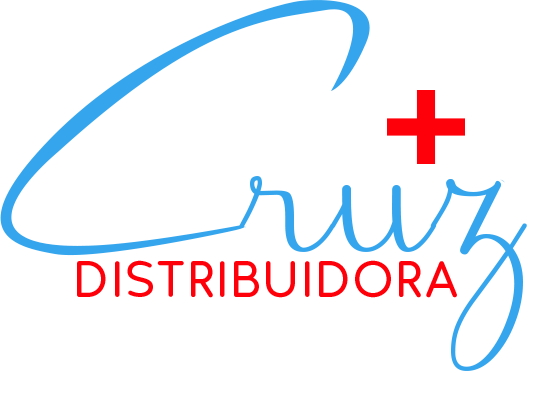
<style>
.page{position:relative;width:553px;height:393px;background:#ffffff}
.page>*{position:absolute;margin:0}
.t1{font:150px "JBCursive";color:#35a5ed}
.t2{font:53px "HankRnd-Regular";letter-spacing:0.03em;color:#fd0009}
</style>
<div class="page">
<p class="t1" style="left:239px;top:176px;width:288px;height:195px">ruz</p>
<p class="t2" style="left:77px;top:260px;width:380px;height:38px">DISTRIBUIDORA</p>
</div>
